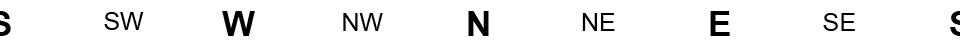
<style>
.page{position:relative;width:960px;height:48px;background:#ffffff}
.page>*{position:absolute;margin:0}
.t1{font:25px "ArialMT";color:#000000}
.t2{font:35px "Arial-BoldMT";color:#000000}
</style>
<div class="page">
<p class="t1" style="left:104px;top:12px;width:40px;height:18px">SW</p>
<p class="t2" style="left:222px;top:11px;width:33px;height:25px">W</p>
<p class="t1" style="left:343px;top:13px;width:40px;height:18px">NW</p>
<p class="t2" style="left:468px;top:11px;width:21px;height:25px">N</p>
<p class="t1" style="left:582px;top:13px;width:33px;height:18px">NE</p>
<p class="t2" style="left:710px;top:11px;width:20px;height:25px">E</p>
<p class="t1" style="left:823px;top:13px;width:32px;height:18px">SE</p>
</div>
